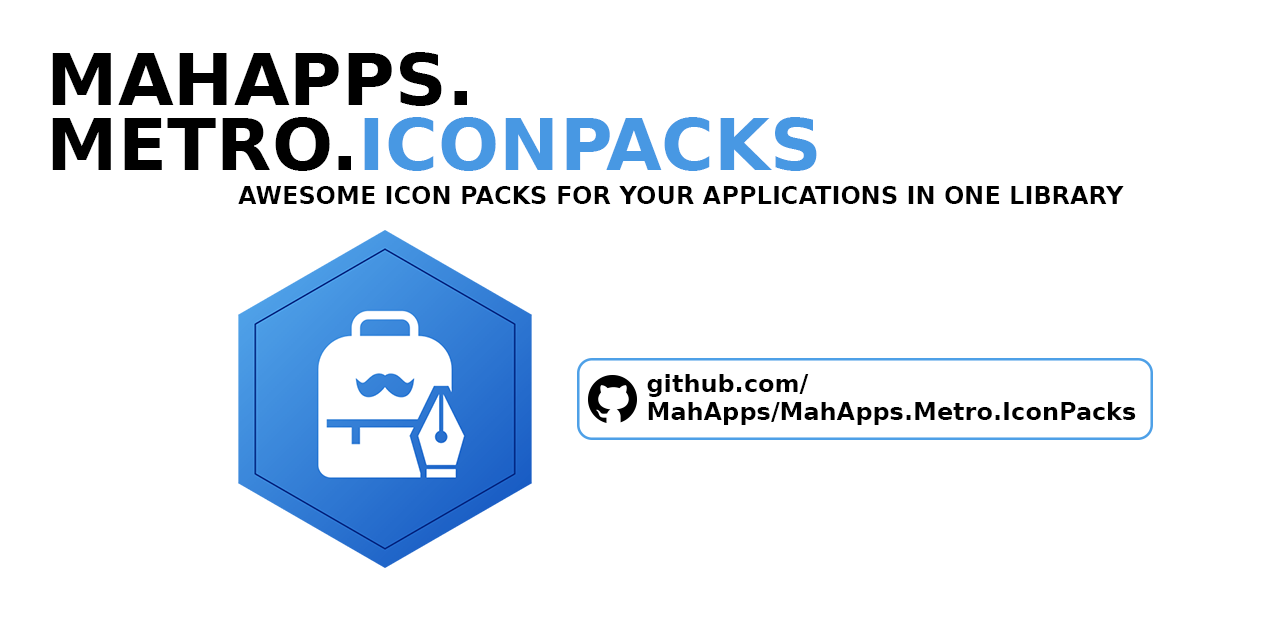
<style>
.page{position:relative;width:1280px;height:640px;background:#ffffff}
.page>*{position:absolute;margin:0}
.t1{font:72px/65px "DejaVuSans-Bold";color:#000000;text-transform:uppercase}
.t2{font:72px/65px "DejaVuSans-Bold";color:#4898e3;text-transform:uppercase}
.t3{font:24px "DejaVuSans-Bold";color:#000000;text-transform:uppercase}
.t4{font:24px/28px "DejaVuSans-Bold";color:#000000}
</style>
<div class="page">
<p class="t1" style="left:52px;top:52px;width:765px;height:119px">MahApps.<br>Metro.<span class="t2">IconPacks</span></p>
<p class="t3" style="left:238px;top:186px;width:886px;height:18px">Awesome icon packs for your applications in one library</p>
<p class="t4" style="left:647px;top:374px;width:489px;height:51px">github.com/<br>MahApps/MahApps.Metro.IconPacks</p>
</div>
